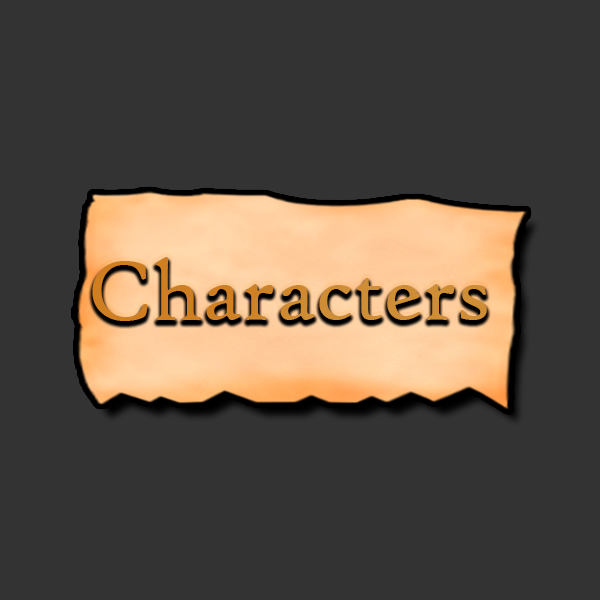
<style>
.page{position:relative;width:600px;height:600px;background:#333333}
.page>*{position:absolute;margin:0}
.t1{font:91.3px "HighTowerText-Reg";color:#cf862a}
</style>
<div class="page">
<p class="t1" style="left:92px;top:257px;width:395px;height:64px">Characters</p>
</div>
